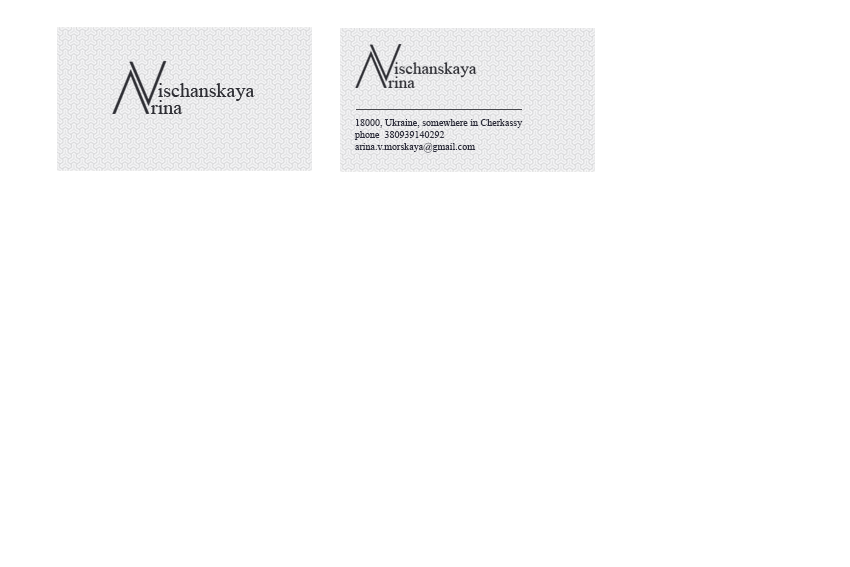
<style>
.page{position:relative;width:850px;height:567px;background:#ffffff}
.page>*{position:absolute;margin:0}
.t1{font:10px "TimesNewRomanPSMT";color:#2d2d3c}
</style>
<div class="page">
<p class="t1" style="left:354px;top:119px;width:169px;height:34px">18000, Ukraine, somewhere in Cherkassy<br>phone  380939140292<br>arina.v.morskaya@gmail.com</p>
</div>
